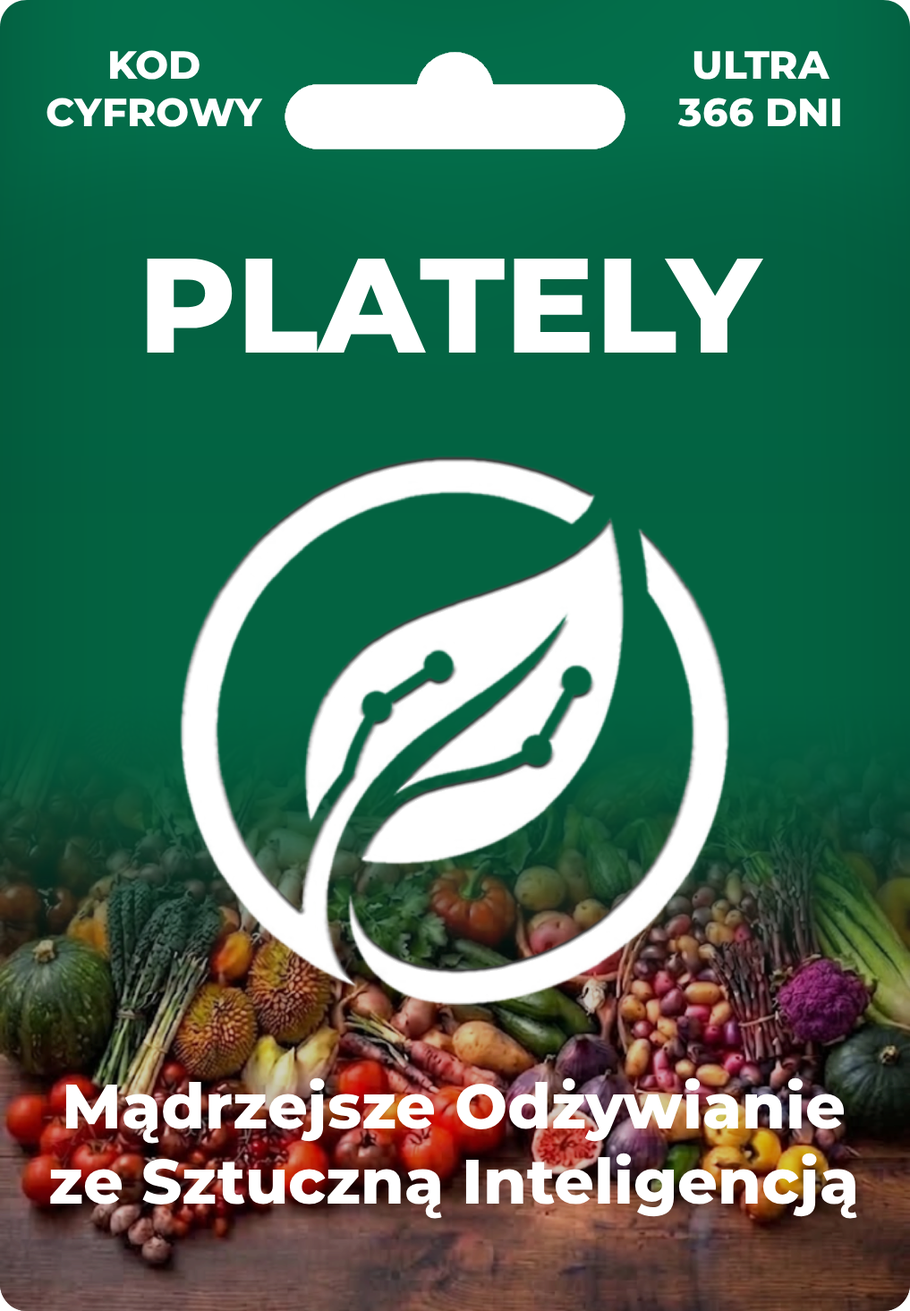
<style>
.page{position:relative;width:910px;height:1311px}
.page>*{position:absolute;margin:0}
.t1{font:39.4px "Montserrat-ExtraBold";color:#ffffff}
.t2{font:134.2px "Montserrat-ExtraBold";color:#ffffff}
.t3{font:62.6px "Montserrat-ExtraBold";color:#ffffff}
</style>
<div class="page">
<p class="t1" style="left:47px;top:50px;width:216px;height:77px;text-align:center">KOD<br>CYFROWY</p>
<p class="t1" style="left:677px;top:51px;width:163px;height:76px;text-align:center">ULTRA<br>366 DNI</p>
<p class="t2" style="left:147px;top:259px;width:616px;height:93px">PLATELY</p>
<p class="t3" style="left:50px;top:1077px;width:807px;height:141px;text-align:center">Mądrzejsze Odżywianie<br>ze Sztuczną Inteligencją</p>
</div>
